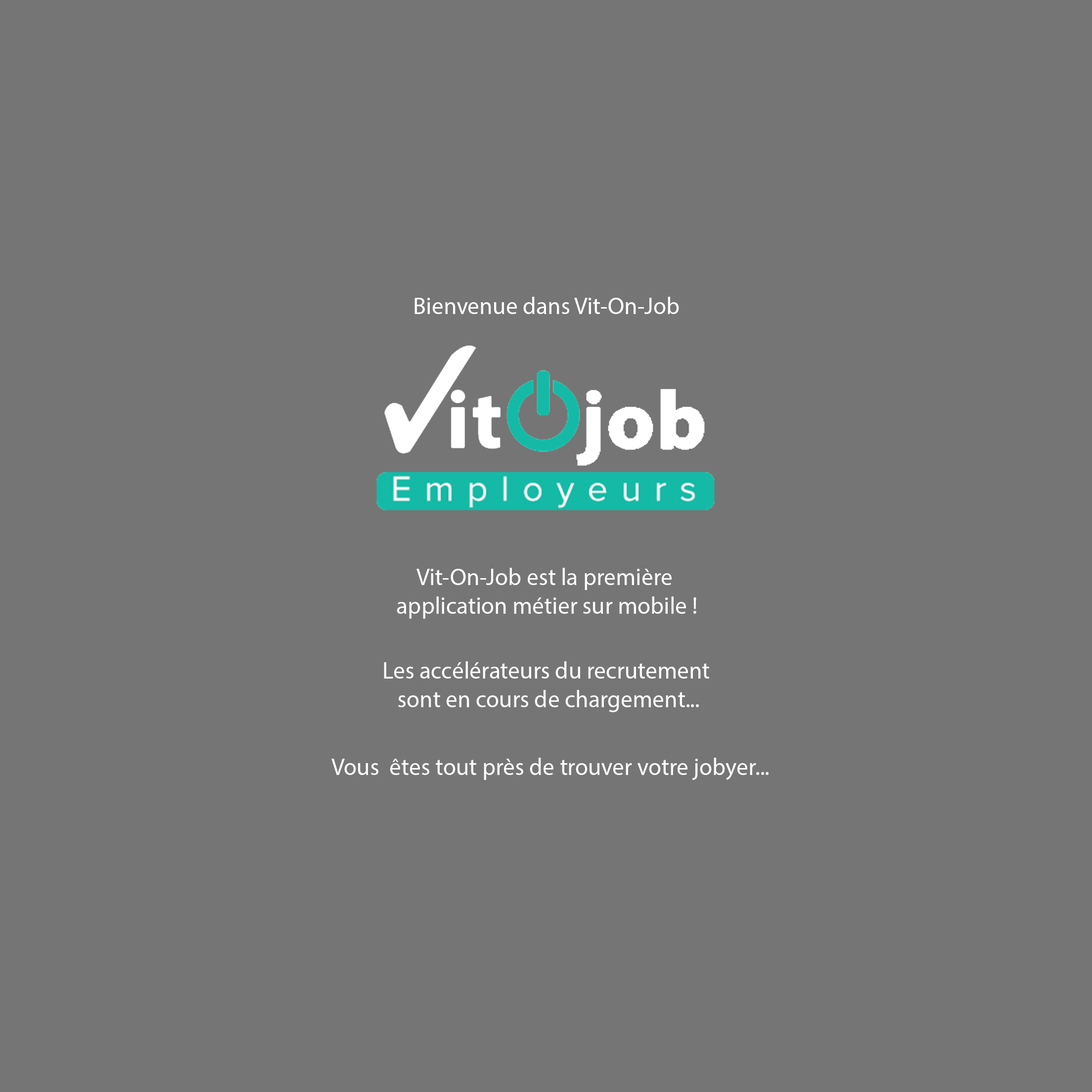
<style>
.page{position:relative;width:1092px;height:1092px;background:#757575}
.page>*{position:absolute;margin:0}
.t1{font:23.7px "MyriadPro-Regular";color:#fefdfd}
</style>
<div class="page">
<p class="t1" style="left:414px;top:297px;width:265px;height:17px">Bienvenue dans Vit-On-Job</p>
<p class="t1" style="left:397px;top:568px;width:299px;height:51px;text-align:center">Vit-On-Job est la première <br>application métier sur mobile !</p>
<p class="t1" style="left:384px;top:661px;width:325px;height:51px;text-align:center">Les accélérateurs du recrutement <br>sont en cours de chargement...</p>
<p class="t1" style="left:331px;top:758px;width:438px;height:22px">Vous  êtes tout près de trouver votre jobyer...</p>
</div>
